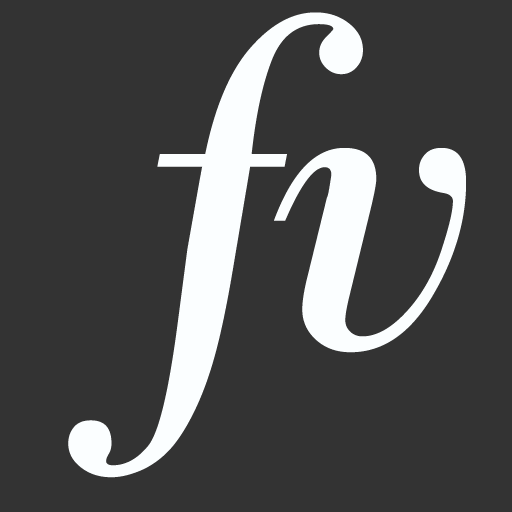
<style>
.page{position:relative;width:512px;height:512px;background:#333333}
.page>*{position:absolute;margin:0}
.t1{font:500px "BodoniMT-Italic";letter-spacing:-0.05em;color:#fbfeff}
</style>
<div class="page">
<p class="t1" style="left:68px;top:12px;width:398px;height:466px">fv</p>
</div>
